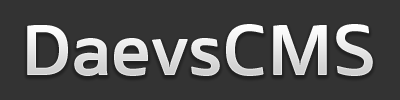
<style>
.page{position:relative;width:400px;height:100px;background:#333333}
.page>*{position:absolute;margin:0}
.t1{font:72px "Mentone-SemiBold";color:#e6e6e6}
</style>
<div class="page">
<p class="t1" style="left:27px;top:24px;width:346px;height:52px">DaevsCMS</p>
</div>
